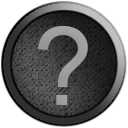
<style>
.page{position:relative;width:128px;height:128px;background:#ffffff}
.page>*{position:absolute;margin:0}
.t1{font:107.6px "ArialMT";letter-spacing:0.05em;color:#a1a1a1}
</style>
<div class="page">
<p class="t1" style="left:37px;top:26px;width:51px;height:79px">?</p>
</div>
